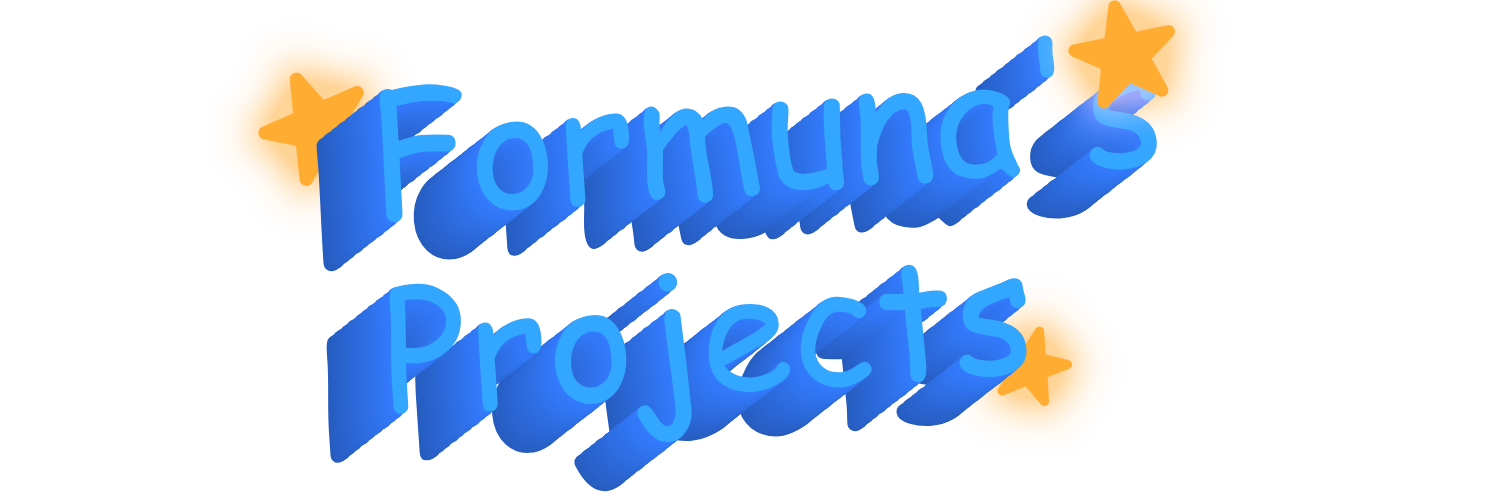
<style>
.page{position:relative;width:1500px;height:500px;background:#ffffff}
.page>*{position:absolute;margin:0}
.t1{font:165.3px "ComicSansMS";color:#33a6ff}
</style>
<div class="page">
<p class="t1" style="left:379px;top:35px;width:779px;height:409px;rotate:-4deg">Formuna's <br>Projects</p>
</div>
